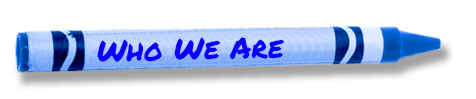
<style>
.page{position:relative;width:476px;height:99px;background:#ffffff}
.page>*{position:absolute;margin:0}
.t1{font:30px "PermanentMarker";color:#0c00ff}
</style>
<div class="page">
<p class="t1" style="left:97px;top:37px;width:187px;height:25px;rotate:-2deg">Who We Are</p>
</div>
